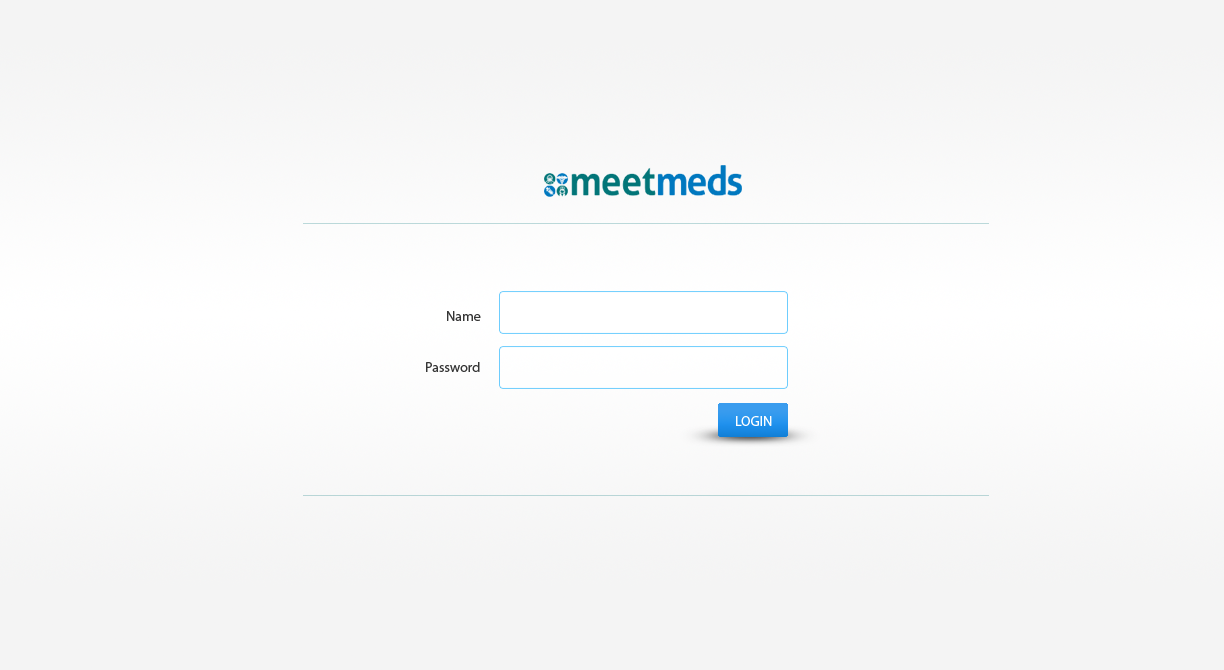
<style>
.page{position:relative;width:1224px;height:670px;background:#f4f4f4}
.page>*{position:absolute;margin:0}
.t1{font:14px "MyriadPro-Regular";color:#363636}
.t2{font:14px "MyriadPro-Regular";color:#fefefe}
</style>
<div class="page">
<p class="t1" style="left:447px;top:311px;width:34px;height:10px">Name</p>
<p class="t1" style="left:426px;top:362px;width:54px;height:10px">Password</p>
<p class="t2" style="left:736px;top:416px;width:36px;height:10px">LOGIN</p>
</div>
